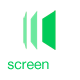
<style>
.page{position:relative;width:80px;height:80px;background:#ffffff}
.page>*{position:absolute;margin:0}
.t1{font:14px "HelveticaNeue";color:#00cb59}
.t2{font:14px "HelveticaNeue";color:#ffffff}
</style>
<div class="page">
<p class="t1" style="left:7px;top:59px;width:69px;height:13px">screen<span class="t2">play</span></p>
</div>
